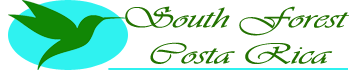
<style>
.page{position:relative;width:350px;height:70px;background:#ffffff}
.page>*{position:absolute;margin:0}
.t1{font:30px "Vivaldii";color:#237201;scale:1.46 1}
</style>
<div class="page">
<p class="t1" style="left:125px;top:6px;width:224px;height:58px;text-align:center">South Forest <br>Costa Rica</p>
</div>
